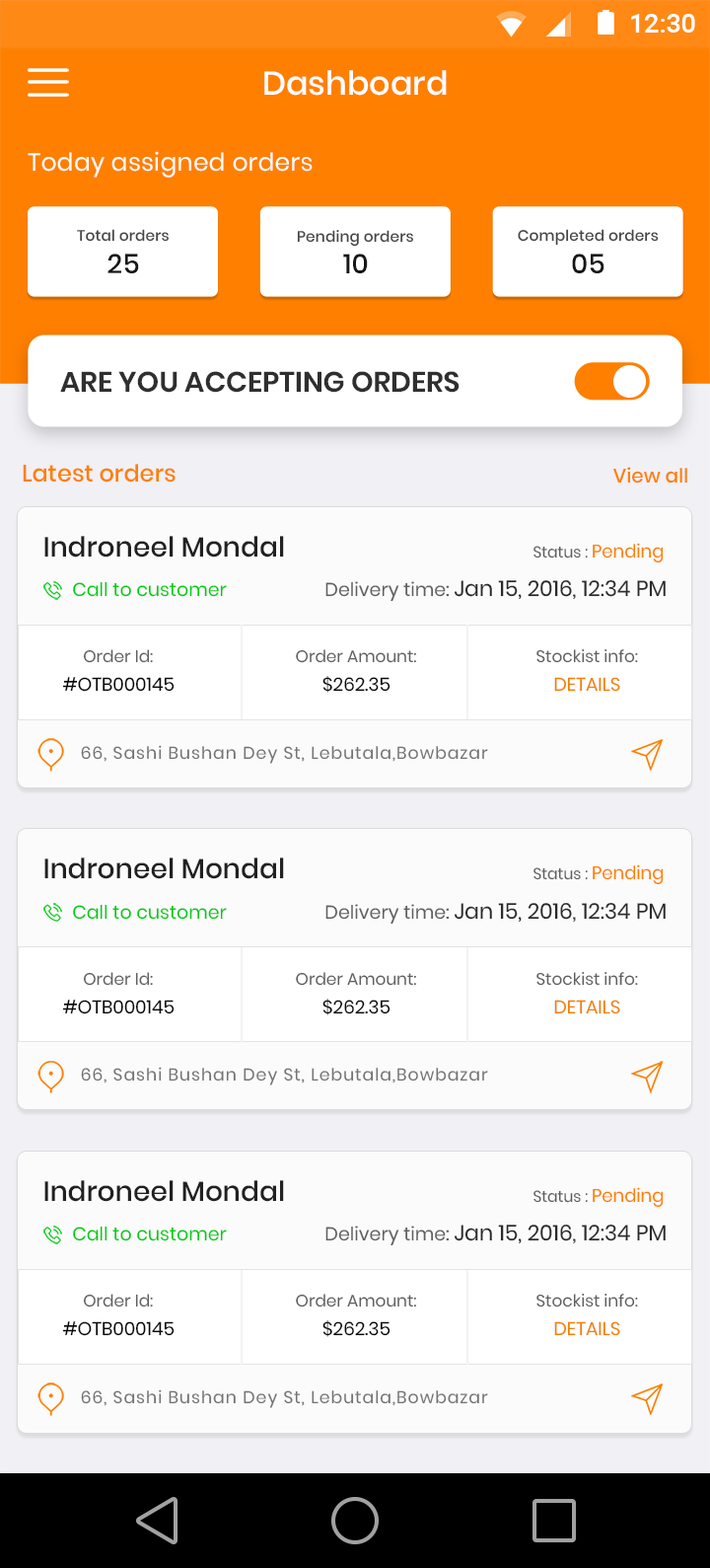
<style>
.page{position:relative;width:710px;height:1568px;background:#fbfbfb}
.page>*{position:absolute;margin:0}
.t1{font:27.1px "Roboto-Medium";color:#ffffff}
.t2{font:32.9px "Poppins-Medium";color:#ffffff}
.t3{font:24.7px "Poppins-Regular";letter-spacing:0.01em;color:#ffffff}
.t4{font:15.1px "Poppins-Medium";letter-spacing:0.01em;color:#464646}
.t5{font:27.1px "Poppins-Medium";letter-spacing:0.01em;color:#171717}
.t6{font:28.3px "Poppins-SemiBold";color:#2f2f2f;text-transform:uppercase}
.t7{font:23.7px "Poppins-Medium";color:#ff7f00}
.t8{font:19.7px "Poppins-Medium";color:#ff7f00}
.t9{font:27.6px "Poppins-Medium";color:#212121}
.t10{font:27.6px "Poppins-Medium";color:#212121;text-transform:uppercase}
.t11{font:15.8px "Poppins-Regular";color:#606060}
.t12{font:18.3px "Poppins-Regular";color:#ff7f00}
.t13{font:18.7px "Poppins-Regular";color:#00cc13}
.t14{font:21.7px "Poppins-Regular";color:#2b2b2b}
.t15{font:18.7px "Poppins-Regular";color:#606060}
.t16{font:21.7px "Poppins-Regular";color:#2b2b2b;text-transform:uppercase}
.t17{font:16.7px "Poppins-Regular";color:#606060}
.t18{font:16.7px "Poppins-Regular";color:#606060;text-transform:uppercase}
.t19{font:18.4px "Poppins-Regular";color:#090909;text-transform:uppercase}
.t20{font:18.4px "Poppins-Regular";color:#f37f00;text-transform:uppercase}
.t21{font:17.1px "Poppins-Regular";letter-spacing:0.06em;color:#737373}
</style>
<div class="page">
<p class="t1" style="left:632px;top:14px;width:64px;height:19px">12:30</p>
<p class="t2" style="left:264px;top:70px;width:183px;height:26px">Dashboard</p>
<p class="t3" style="left:28px;top:151px;width:285px;height:27px">Today assigned orders</p>
<p class="t4" style="left:77px;top:229px;width:92px;height:13px">Total orders</p>
<p class="t4" style="left:297px;top:230px;width:116px;height:17px">Pending orders</p>
<p class="t4" style="left:518px;top:229px;width:141px;height:17px">Completed orders</p>
<p class="t5" style="left:108px;top:254px;width:31px;height:19px">25</p>
<p class="t5" style="left:343px;top:254px;width:25px;height:19px">10</p>
<p class="t5" style="left:572px;top:254px;width:33px;height:19px">05</p>
<p class="t6" style="left:60px;top:371px;width:400px;height:22px">Are you accepting orders</p>
<p class="t7" style="left:23px;top:464px;width:153px;height:19px">Latest orders</p>
<p class="t8" style="left:614px;top:467px;width:74px;height:17px">View all</p>
<p class="t9" style="left:44px;top:536px;width:240px;height:22px"><span class="t10">I</span>ndroneel Mondal</p>
<p class="t11" style="left:534px;top:543px;width:130px;height:20px">Status : <span class="t12">Pending</span></p>
<p class="t13" style="left:73px;top:581px;width:154px;height:16px">Call to customer</p>
<p class="t14" style="left:326px;top:579px;width:340px;height:23px"><span class="t15">Delivery time: </span><span class="t16">j</span>an 15, 2016, 12:34 PM</p>
<p class="t17" style="left:83px;top:649px;width:70px;height:14px"><span class="t18">o</span>rder <span class="t18">i</span>d<span class="t18">:</span></p>
<p class="t17" style="left:296px;top:649px;width:120px;height:14px"><span class="t18">o</span>rder Amount:</p>
<p class="t17" style="left:537px;top:649px;width:101px;height:14px">Stockist info:</p>
<p class="t19" style="left:62px;top:677px;width:113px;height:15px">#oTB000145</p>
<p class="t19" style="left:323px;top:676px;width:68px;height:17px">$262.35</p>
<p class="t20" style="left:555px;top:677px;width:66px;height:15px">details</p>
<p class="t21" style="left:81px;top:745px;width:407px;height:19px">66, Sashi Bushan Dey St, Lebutala,Bowbazar</p>
<p class="t9" style="left:44px;top:858px;width:240px;height:21px"><span class="t10">I</span>ndroneel Mondal</p>
<p class="t11" style="left:534px;top:864px;width:130px;height:21px">Status : <span class="t12">Pending</span></p>
<p class="t13" style="left:73px;top:904px;width:154px;height:16px">Call to customer</p>
<p class="t14" style="left:326px;top:902px;width:340px;height:23px"><span class="t15">Delivery time: </span><span class="t16">j</span>an 15, 2016, 12:34 PM</p>
<p class="t17" style="left:83px;top:972px;width:70px;height:14px"><span class="t18">o</span>rder <span class="t18">i</span>d<span class="t18">:</span></p>
<p class="t17" style="left:296px;top:972px;width:120px;height:14px"><span class="t18">o</span>rder Amount:</p>
<p class="t17" style="left:537px;top:972px;width:101px;height:14px">Stockist info:</p>
<p class="t19" style="left:62px;top:1000px;width:113px;height:14px">#oTB000145</p>
<p class="t19" style="left:323px;top:999px;width:68px;height:16px">$262.35</p>
<p class="t20" style="left:555px;top:1000px;width:66px;height:14px">details</p>
<p class="t21" style="left:81px;top:1067px;width:407px;height:18px">66, Sashi Bushan Dey St, Lebutala,Bowbazar</p>
<p class="t9" style="left:44px;top:1180px;width:240px;height:22px"><span class="t10">I</span>ndroneel Mondal</p>
<p class="t11" style="left:534px;top:1187px;width:130px;height:21px">Status : <span class="t12">Pending</span></p>
<p class="t13" style="left:73px;top:1226px;width:154px;height:15px">Call to customer</p>
<p class="t14" style="left:326px;top:1224px;width:340px;height:22px"><span class="t15">Delivery time: </span><span class="t16">j</span>an 15, 2016, 12:34 PM</p>
<p class="t17" style="left:83px;top:1294px;width:70px;height:13px"><span class="t18">o</span>rder <span class="t18">i</span>d<span class="t18">:</span></p>
<p class="t17" style="left:296px;top:1294px;width:120px;height:13px"><span class="t18">o</span>rder Amount:</p>
<p class="t17" style="left:537px;top:1294px;width:101px;height:13px">Stockist info:</p>
<p class="t19" style="left:62px;top:1321px;width:113px;height:15px">#oTB000145</p>
<p class="t19" style="left:323px;top:1320px;width:68px;height:17px">$262.35</p>
<p class="t20" style="left:555px;top:1321px;width:66px;height:15px">details</p>
<p class="t21" style="left:81px;top:1389px;width:407px;height:19px">66, Sashi Bushan Dey St, Lebutala,Bowbazar</p>
</div>
